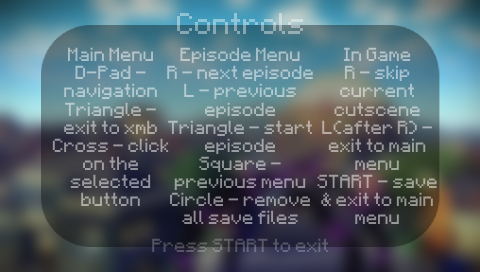
<style>
.page{position:relative;width:480px;height:272px}
.page>*{position:absolute;margin:0}
.t1{font:24px "Minecraft"}
.t2{font:15.1px "Minecraft"}
</style>
<div class="page">
<p class="t1" style="left:177px;top:13px;width:126px;height:21px">Controls</p>
<p class="t2" style="left:52px;top:47px;width:117px;height:159px;text-align:center">Main Menu<br>D-Pad - navigation<br>Triangle -<br>exit to xmb<br>Cross - click on the selected button</p>
<p class="t2" style="left:167px;top:47px;width:146px;height:177px;text-align:center">Episode Menu<br>R - next episode<br>L - previous episode<br>Triangle - start episode<br>Square - previous menu<br>Circle - remove all save files</p>
<p class="t2" style="left:317px;top:47px;width:120px;height:177px;text-align:center">In Game<br>R - skip current cutscene <br>L(after R) - exit to main menu <br>START - save &amp; exit to main menu</p>
<p class="t2" style="left:152px;top:238px;width:176px;height:14px">Press START to exit</p>
</div>
